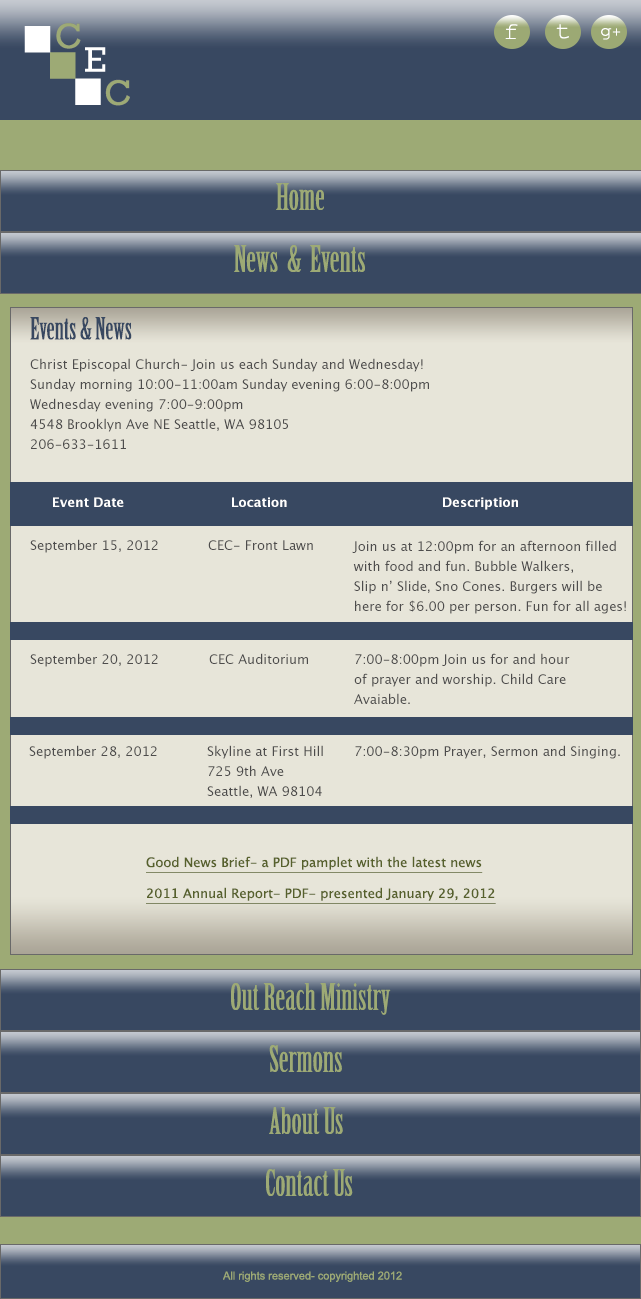
<style>
.page{position:relative;width:641px;height:1299px;background:#e7e5d9}
.page>*{position:absolute;margin:0}
.t1{font:24px "CourierNewPSMT";color:#ffffff;scale:1.1 1}
.t2{font:18px "CourierNewPSMT";color:#ffffff;scale:1.1 1}
.t3{font:14px "CourierNewPSMT";color:#ffffff;scale:1.1 1}
.t4{font:36px "BirchStd";color:#9daa75}
.t5{font:30px "BirchStd";color:#384861}
.t6{font:13px/20px "LucidaGrande";color:#4d4c4c}
.t7{font:13px "LucidaGrande-Bold";color:#ffffff}
.t8{font:13px "LucidaGrande";color:#4d4c4c}
.t9{font:13px "LucidaGrande";color:#57612c;text-decoration:underline}
.t10{font:11.1px "ArialMT";color:#9daa75}
</style>
<div class="page">
<p class="t1" style="left:505px;top:24px;width:13px;height:15px">f</p>
<p class="t1" style="left:556px;top:24px;width:13px;height:15px">t</p>
<p class="t2" style="left:601px;top:28px;width:20px;height:12px">g<span class="t3">+</span></p>
<p class="t4" style="left:276px;top:183px;width:48px;height:27px">Home</p>
<p class="t4" style="left:234px;top:245px;width:131px;height:27px">News  &amp;  Events</p>
<p class="t5" style="left:30px;top:317px;width:102px;height:23px">Events &amp; News</p>
<p class="t6" style="left:30px;top:358px;width:399px;height:91px">Christ Episcopal Church- Join us each Sunday and Wednesday!<br>Sunday morning 10:00-11:00am Sunday evening 6:00-8:00pm<br>Wednesday evening 7:00-9:00pm<br>4548 Brooklyn Ave NE Seattle, WA 98105<br>206-633-1611</p>
<p class="t7" style="left:53px;top:497px;width:71px;height:10px">Event Date</p>
<p class="t7" style="left:232px;top:497px;width:55px;height:10px">Location</p>
<p class="t7" style="left:443px;top:497px;width:75px;height:13px">Description</p>
<p class="t8" style="left:30px;top:539px;width:128px;height:14px">September 15, 2012</p>
<p class="t8" style="left:208px;top:540px;width:105px;height:10px">CEC- Front Lawn</p>
<p class="t6" style="left:352px;top:540px;width:274px;height:74px">Join us at 12:00pm for an afternoon filled<br>with food and fun. Bubble Walkers, <br>Slip n’ Slide, Sno Cones. Burgers will be <br>here for $6.00 per person. Fun for all ages!</p>
<p class="t8" style="left:30px;top:653px;width:128px;height:14px">September 20, 2012</p>
<p class="t8" style="left:209px;top:653px;width:99px;height:11px">CEC Auditorium</p>
<p class="t6" style="left:354px;top:653px;width:216px;height:51px">7:00-8:00pm Join us for and hour<br>of prayer and worship. Child Care<br>Avaiable.</p>
<p class="t8" style="left:29px;top:745px;width:128px;height:14px">September 28, 2012</p>
<p class="t6" style="left:207px;top:745px;width:116px;height:53px">Skyline at First Hill<br>725 9th Ave<br>Seattle, WA 98104</p>
<p class="t8" style="left:355px;top:745px;width:265px;height:14px">7:00-8:30pm Prayer, Sermon and Singing.</p>
<p class="t9" style="left:146px;top:856px;width:337px;height:17px">Good News Brief- a PDF pamplet with the latest news</p>
<p class="t9" style="left:146px;top:887px;width:350px;height:17px">2011 Annual Report- PDF- presented January 29, 2012</p>
<p class="t4" style="left:231px;top:983px;width:160px;height:32px">Out Reach Ministry</p>
<p class="t4" style="left:269px;top:1045px;width:73px;height:27px">Sermons</p>
<p class="t4" style="left:269px;top:1107px;width:74px;height:27px">About Us</p>
<p class="t4" style="left:266px;top:1169px;width:87px;height:27px">Contact Us</p>
<p class="t10" style="left:223px;top:1271px;width:179px;height:11px">All rights reserved- copyrighted 2012</p>
</div>
